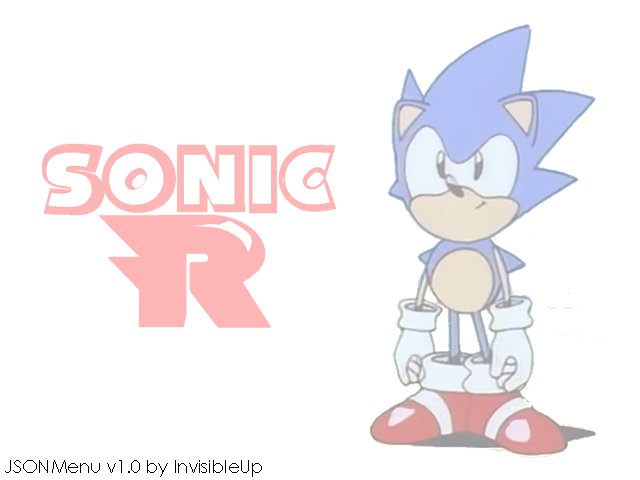
<style>
.page{position:relative;width:640px;height:480px;background:#ffffff}
.page>*{position:absolute;margin:0}
.t1{font:18px "CenturyGothic";color:#000000}
</style>
<div class="page">
<p class="t1" style="left:5px;top:460px;width:257px;height:17px">JSONMenu v1.0 by InvisibleUp</p>
</div>
